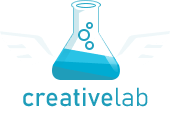
<style>
.page{position:relative;width:170px;height:113px;background:#ffffff}
.page>*{position:absolute;margin:0}
.t1{font:25.7px "Bahnschrift";color:#1f9dba}
.t2{font:25.7px "Bahnschrift-Light";color:#1f9dba}
</style>
<div class="page">
<p class="t1" style="left:23px;top:87px;width:125px;height:20px">creative<span class="t2">lab</span></p>
</div>
